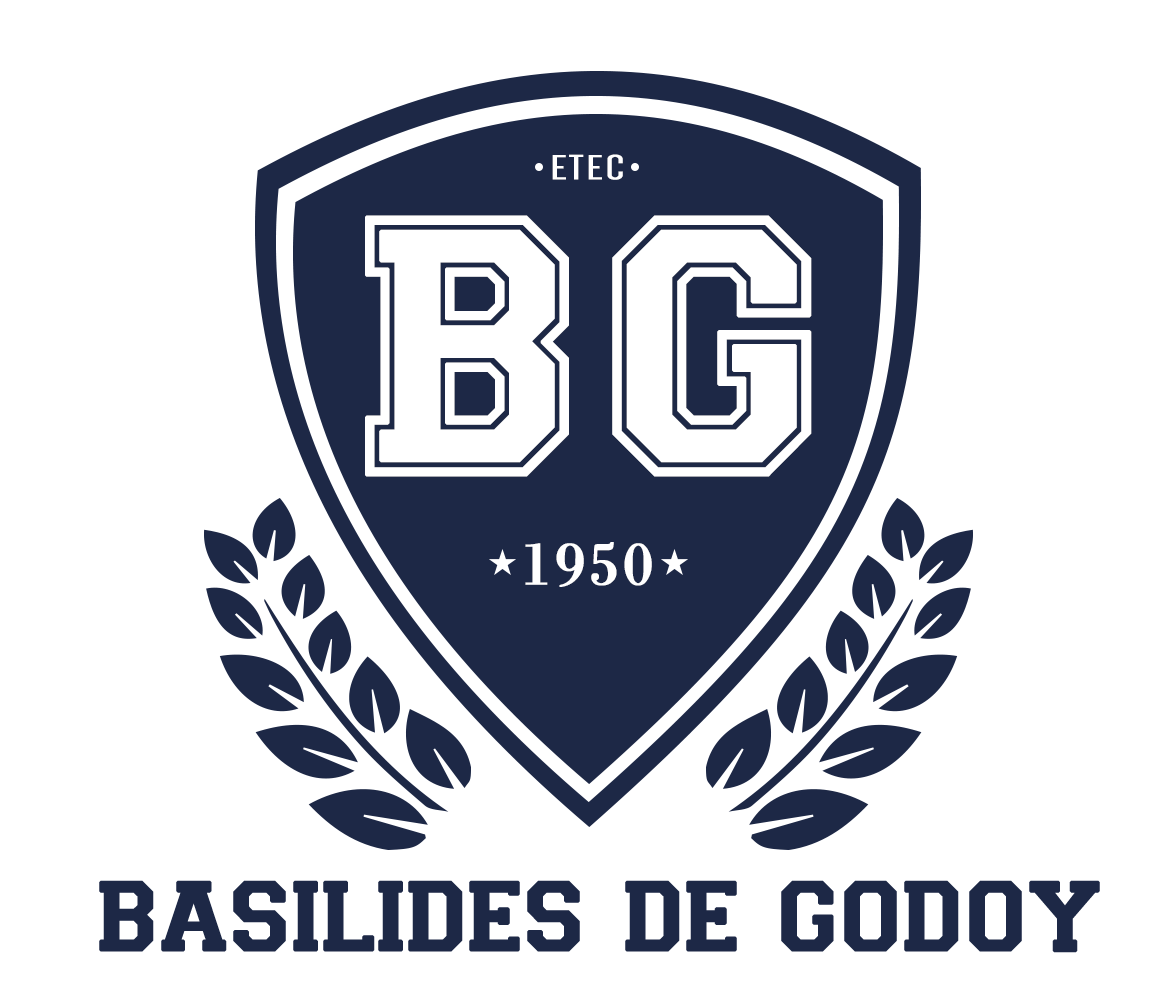
<style>
.page{position:relative;width:1176px;height:1000px;background:#ffffff}
.page>*{position:absolute;margin:0}
.t1{font:35.8px "Dense-Regular";letter-spacing:0.03em;color:#ffffff;font-weight:bold;scale:1.48 1}
.t2{font:368.5px "Varsity-Regular";letter-spacing:0.03em;color:#ffffff;font-weight:bold}
.t3{font:63.1px "BodoniMT";letter-spacing:0.03em;color:#ffffff;font-weight:bold}
.t4{font:108.7px "Varsity-Regular";letter-spacing:0.03em;color:#1d2846;font-weight:bold}
</style>
<div class="page">
<p class="t1" style="left:552px;top:154px;width:71px;height:26px">ETEC</p>
<p class="t2" style="left:365px;top:215px;width:447px;height:262px">BG</p>
<p class="t3" style="left:525px;top:542px;width:127px;height:45px">1950</p>
<p class="t4" style="left:99px;top:880px;width:1001px;height:73px">basilides de godoy</p>
</div>
